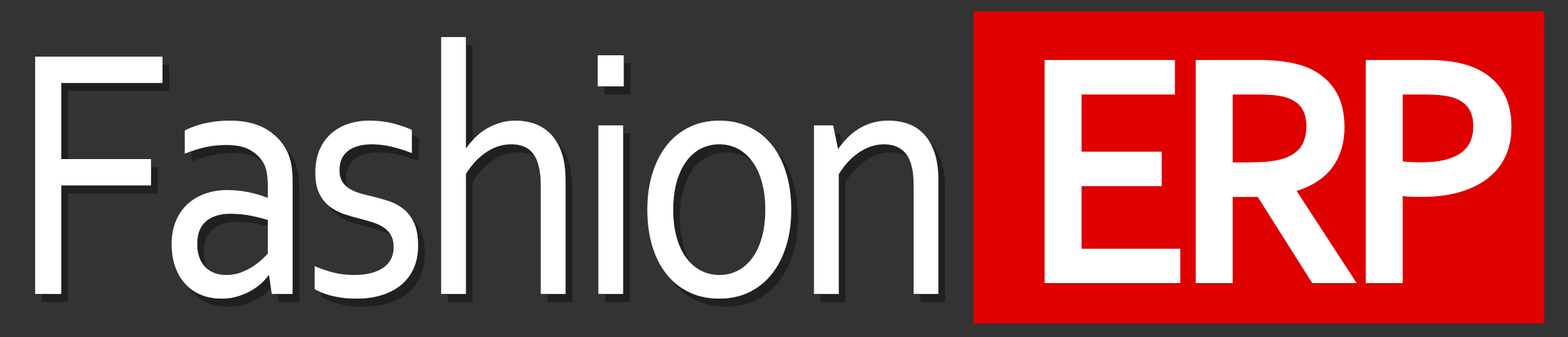
<style>
.page{position:relative;width:1568px;height:337px;background:#333333}
.page>*{position:absolute;margin:0}
.t1{font:363.3px "Corbel";letter-spacing:-0.05em;color:#ffffff;scale:0.9 1}
.t2{font:341.2px "Corbel-Bold";letter-spacing:-0.075em;color:#ffffff;scale:0.9 1}
</style>
<div class="page">
<p class="t1" style="left:35px;top:37px;width:904px;height:262px">Fashion</p>
<p class="t2" style="left:1044px;top:60px;width:468px;height:223px">ERP</p>
</div>
